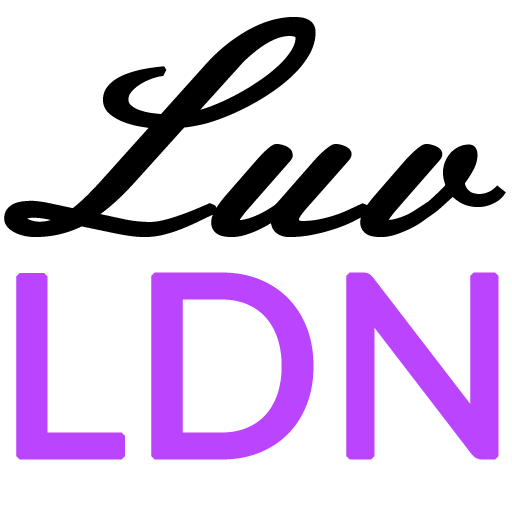
<style>
.page{position:relative;width:512px;height:512px;background:#ffffff}
.page>*{position:absolute;margin:0}
.t1{font:290px "MeieScript-Regular";color:#000000;font-weight:bold}
.t2{font:250px "Lato-Regular";color:#bb44ff;font-weight:bold}
</style>
<div class="page">
<p class="t1" style="left:4px;top:17px;width:502px;height:220px">Luv</p>
<p class="t2" style="left:16px;top:272px;width:483px;height:188px">LDN</p>
</div>
